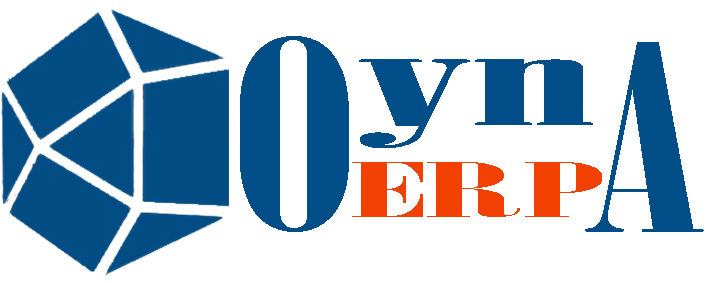
<style>
.page{position:relative;width:709px;height:283px;background:#ffffff}
.page>*{position:absolute;margin:0}
.t1{font:261.5px "BodoniMTPosterCompressed";color:#014d88;scale:1.53 1}
.t2{font:124.2px "BodoniMTPosterCompressed";color:#014d88;scale:3.48 1}
.t3{font:74.6px "BodoniMTPosterCompressed";color:#f34103;scale:3.41 1}
</style>
<div class="page">
<p class="t1" style="left:240px;top:36px;width:109px;height:196px">O</p>
<p class="t1" style="left:585px;top:42px;width:119px;height:190px">A</p>
<p class="t2" style="left:359px;top:59px;width:234px;height:89px">yn</p>
<p class="t3" style="left:352px;top:162px;width:250px;height:55px">ERP</p>
</div>
